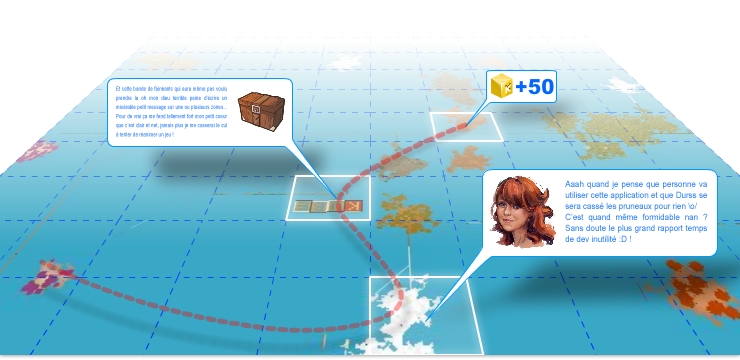
<style>
.page{position:relative;width:740px;height:360px;background:#ffffff}
.page>*{position:absolute;margin:0}
.t1{font:5.8px/9.1px "ArialMT";scale:0.8 1}
.t2{font:8.8px/11px "ArialMT";color:#2f82ff;scale:0.91 1}
</style>
<div class="page">
<p class="t1" style="left:116px;top:86px;width:111px;height:52px;text-align:justify">Et cette bande de fainéants qui aura même pas voulu prendre la oh mon dieu terrible peine d’écrire un misérable petit message sur une ou plusieurs zones... Pour de vrai ça me fend tellement fort mon petit coeur que c’est clair et net, jamais plus je me casserai le cul à tenter de réanimer un jeu !</p>
<p class="t2" style="left:565px;top:180px;width:143px;height:62px;text-align:justify">Aaah quand je pense que personne va utiliser cette application et que Durss se sera cassé les pruneaux pour rien \o/<br>C’est quand même formidable nan ? Sans doute le plus grand rapport temps de dev inutilité :D !</p>
</div>
